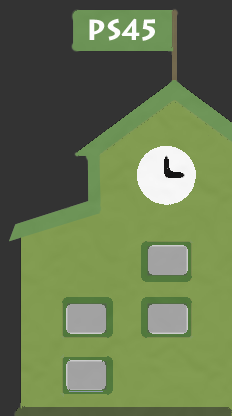
<style>
.page{position:relative;width:232px;height:416px;background:#333333}
.page>*{position:absolute;margin:0}
.t1{font:29.3px "Lithos-Bold";color:#ffffff}
</style>
<div class="page">
<p class="t1" style="left:89px;top:18px;width:66px;height:23px">PS45</p>
</div>
